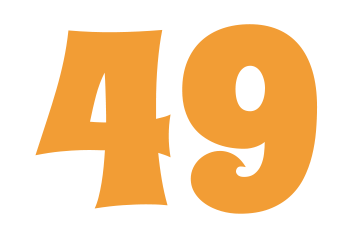
<style>
.page{position:relative;width:354px;height:236px;background:#ffffff}
.page>*{position:absolute;margin:0}
.t1{font:250px "SpicyRice-Regular";color:#f29d35}
</style>
<div class="page">
<p class="t1" style="left:35px;top:24px;width:283px;height:190px">49</p>
</div>
